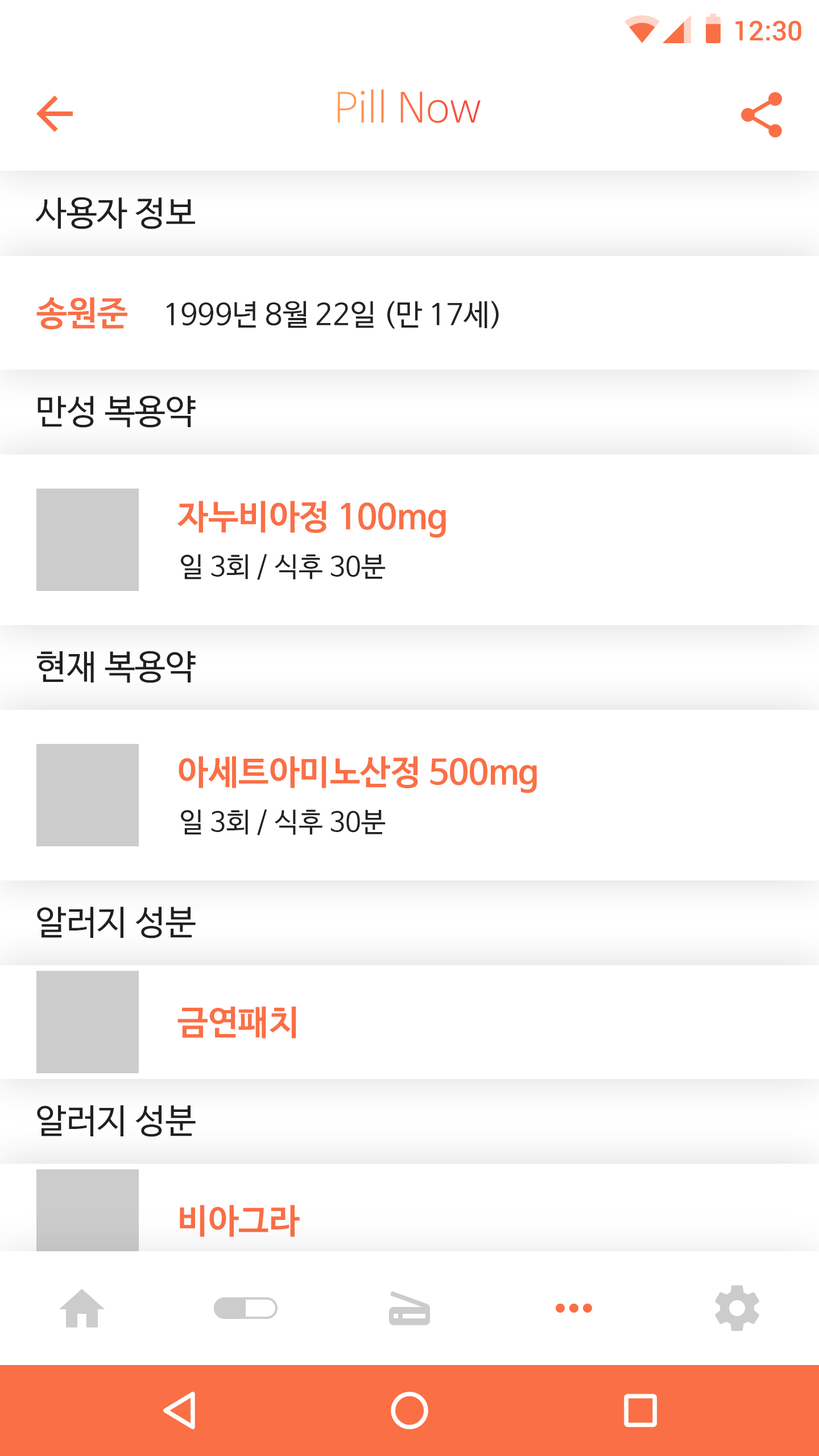
<style>
.page{position:relative;width:819px;height:1456px;background:#ffffff}
.page>*{position:absolute;margin:0}
.t1{font:27.3px "Roboto-Medium";color:#fa6f45}
.t2{font:40.9px "NanumBarunGothicLight"}
.t3{font:34.1px "NanumBarunGothic";color:#202020}
.t4{font:34.1px "NanumBarunGothicBold";color:#fa6f45}
.t5{font:29.6px "NanumBarunGothic";color:#222222}
.t6{font:27.3px "NanumBarunGothic";color:#222222}
</style>
<div class="page">
<p class="t1" style="left:735px;top:20px;width:66px;height:21px">12:30</p>
<p class="t2" style="left:337px;top:89px;width:144px;height:34px">Pill Now</p>
<p class="t3" style="left:35px;top:197px;width:160px;height:32px">사용자 정보</p>
<p class="t4" style="left:36px;top:297px;width:91px;height:32px">송원준</p>
<p class="t5" style="left:167px;top:301px;width:332px;height:28px">1999년 8월 22일 (만 17세)</p>
<p class="t3" style="left:38px;top:395px;width:158px;height:33px">만성 복용약</p>
<p class="t4" style="left:177px;top:500px;width:269px;height:38px">자누비아정 100mg</p>
<p class="t6" style="left:181px;top:554px;width:205px;height:26px">일 3회 / 식후 30분</p>
<p class="t3" style="left:37px;top:651px;width:159px;height:32px">현재 복용약</p>
<p class="t4" style="left:179px;top:756px;width:358px;height:37px">아세트아미노산정 500mg</p>
<p class="t6" style="left:181px;top:809px;width:205px;height:26px">일 3회 / 식후 30분</p>
<p class="t3" style="left:37px;top:907px;width:159px;height:31px">알러지 성분</p>
<p class="t4" style="left:177px;top:1006px;width:119px;height:33px">금연패치</p>
<p class="t3" style="left:37px;top:1105px;width:159px;height:32px">알러지 성분</p>
<p class="t4" style="left:180px;top:1205px;width:120px;height:32px">비아그라</p>
</div>
